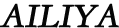
<style>
.page{position:relative;width:119px;height:28px;background:#ffffff}
.page>*{position:absolute;margin:0}
.t1{font:36px "STKaiti";color:#060606;font-weight:bold;font-style:italic}
.t2{font:34px "STKaiti";color:#060606;font-weight:bold;font-style:italic}
.t3{font:30px "STKaiti";color:#060606;font-weight:bold;font-style:italic}
</style>
<div class="page">
<p class="t1" style="left:0px;top:3px;width:119px;height:25px"><span class="t2">AILIYA</span>AaAAAAAA<span class="t3">A</span></p>
</div>
